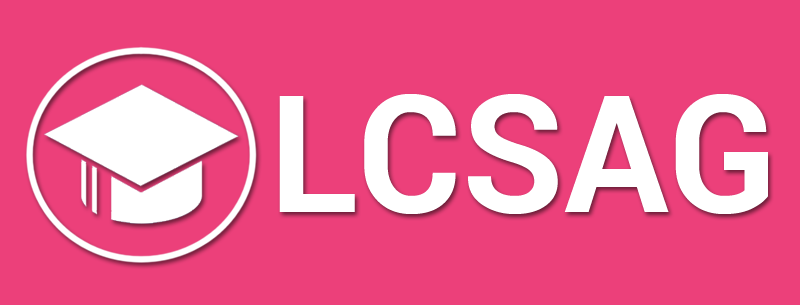
<style>
.page{position:relative;width:800px;height:305px;background:#ec407a}
.page>*{position:absolute;margin:0}
.t1{font:162.7px "Roboto-Bold";color:#ffffff}
</style>
<div class="page">
<p class="t1" style="left:279px;top:94px;width:489px;height:120px">LCSAG</p>
</div>
